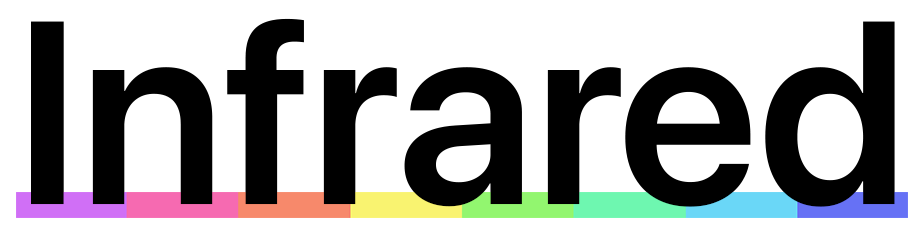
<style>
.page{position:relative;width:924px;height:238px;background:#ffffff}
.page>*{position:absolute;margin:0}
.t1{font:258.9px "SFPro-Semibold";color:#000000}
</style>
<div class="page">
<p class="t1" style="left:31px;top:18px;width:864px;height:189px">Infrared</p>
</div>
